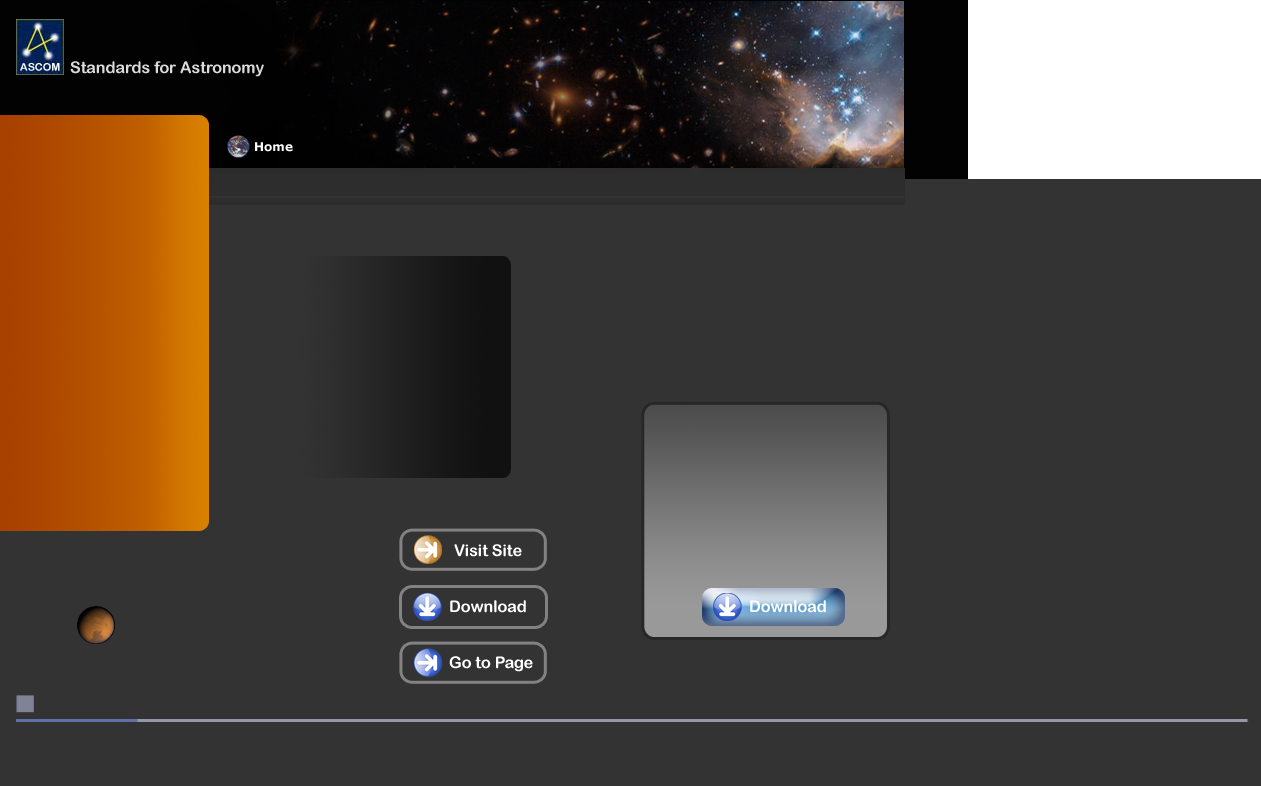
<style>
.page{position:relative;width:1261px;height:786px;background:#333333}
.page>*{position:absolute;margin:0}
.t1{font:16px "ArialRoundedMTBold";color:#dbdbda}
.t2{font:12px "Verdana-Bold";color:#ffffff}
.t3{font:16px "ArialRoundedMTBold";color:#ffffff}
</style>
<div class="page">
<p class="t1" style="left:70px;top:61px;width:194px;height:16px">Standards for Astronomy</p>
<p class="t2" style="left:255px;top:142px;width:38px;height:10px">Home</p>
<p class="t3" style="left:454px;top:544px;width:68px;height:13px">Visit Site</p>
<p class="t3" style="left:450px;top:600px;width:76px;height:13px">Download</p>
<p class="t3" style="left:750px;top:600px;width:76px;height:13px">Download</p>
<p class="t3" style="left:449px;top:656px;width:84px;height:16px">Go to Page</p>
</div>
